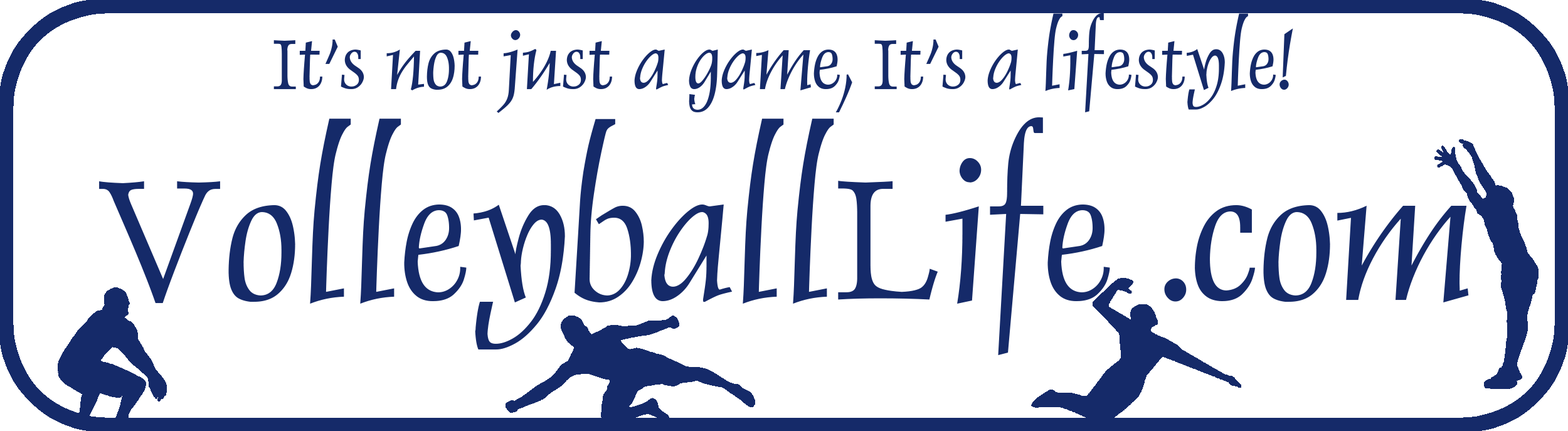
<style>
.page{position:relative;width:1568px;height:431px;background:#ffffff}
.page>*{position:absolute;margin:0}
.t1{font:81px "DolphinPlain";color:#152a69}
.t2{font:194.4px "DolphinPlain";color:#152a69}
</style>
<div class="page">
<p class="t1" style="left:273px;top:13px;width:1020px;height:100px">It’s not just a game, It’s a lifestyle!</p>
<p class="t2" style="left:99px;top:117px;width:1370px;height:238px">VolleyballLife .com</p>
</div>
